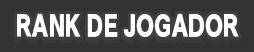
<style>
.page{position:relative;width:254px;height:52px;background:#333333}
.page>*{position:absolute;margin:0}
.t1{font:26.7px "TsukuGoPro-U";letter-spacing:0.016em;color:#ffffff;scale:0.71 1}
</style>
<div class="page">
<p class="t1" style="left:17px;top:13px;width:222px;height:24px">RANK DE JOGADOR</p>
</div>
